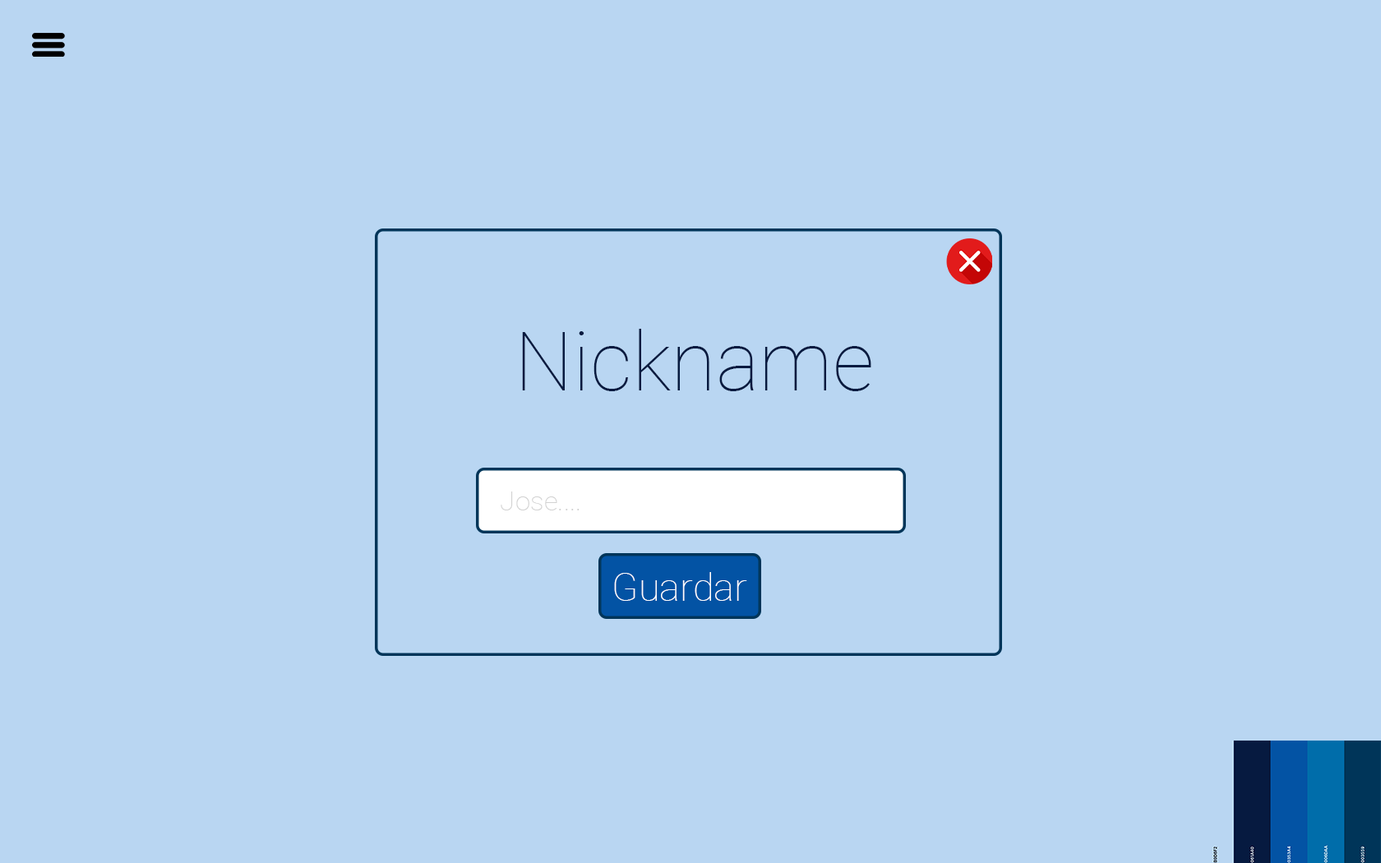
<style>
.page{position:relative;width:1381px;height:863px;background:#b9d6f2}
.page>*{position:absolute;margin:0}
.t1{font:82.2px "Roboto-Thin";color:#061a40}
.t2{font:27.4px "Roboto-Thin";color:#d2d2d2}
.t3{font:38.7px "Roboto-Thin";color:#ffffff}
</style>
<div class="page">
<p class="t1" style="left:522px;top:329px;width:350px;height:62px">Nickname</p>
<p class="t2" style="left:501px;top:492px;width:79px;height:19px">Jose....</p>
<p class="t3" style="left:614px;top:572px;width:133px;height:29px">Guardar</p>
</div>
